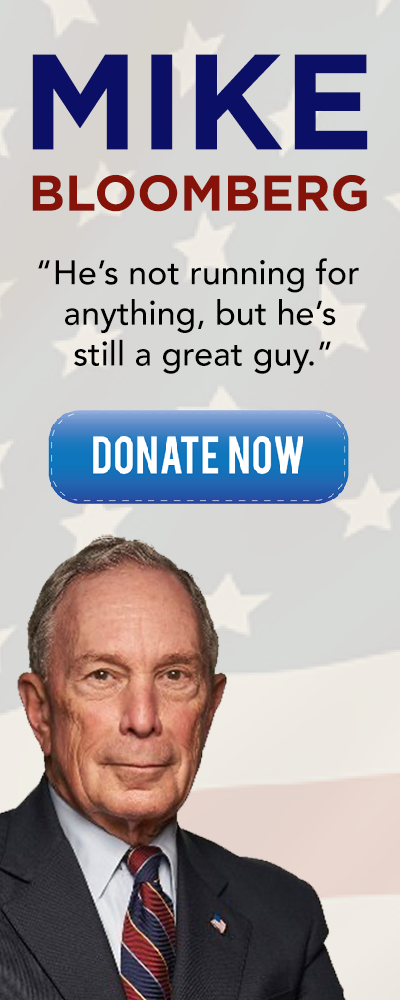
<style>
.page{position:relative;width:400px;height:1000px}
.page>*{position:absolute;margin:0}
.t1{font:135.3px "Gotham-Bold";color:#0b0f66}
.t2{font:50.4px "Gotham-Bold";color:#851309}
.t3{font:33.9px "Avenir-Medium";color:#000000}
</style>
<div class="page">
<p class="t1" style="left:32px;top:54px;width:336px;height:96px">MIKE</p>
<p class="t2" style="left:32px;top:174px;width:335px;height:38px">BLOOMBERG</p>
<p class="t3" style="left:38px;top:258px;width:321px;height:116px">“He’s not running for  <br>   anything, but he’s <br>    still a great guy.”</p>
</div>
